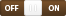
<style>
.page{position:relative;width:66px;height:16px}
.page>*{position:absolute;margin:0}
.t1{font:8px "MyriadPro-Semibold";color:#ffffff}
</style>
<div class="page">
<p class="t1" style="left:5px;top:5px;width:14px;height:6px">OFF</p>
<p class="t1" style="left:48px;top:5px;width:11px;height:6px">ON</p>
</div>
